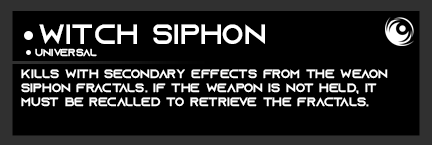
<style>
.page{position:relative;width:432px;height:145px;background:#000000}
.page>*{position:absolute;margin:0}
.t1{font:28px "AzonixRegular";color:#ffffff}
.t2{font:10px "AzonixRegular";color:#ffffff}
.t3{font:12px "AzonixRegular";color:#ffffff}
</style>
<div class="page">
<p class="t1" style="left:39px;top:24px;width:226px;height:20px">witch siphon</p>
<p class="t2" style="left:35px;top:48px;width:62px;height:9px">universal</p>
<p class="t3" style="left:21px;top:69px;width:367px;height:38px">kills with secondary effects from the weaon<br>siphon fractals. if the weapon is not held, it<br>must be recalled to retrieve the fractals.</p>
</div>
